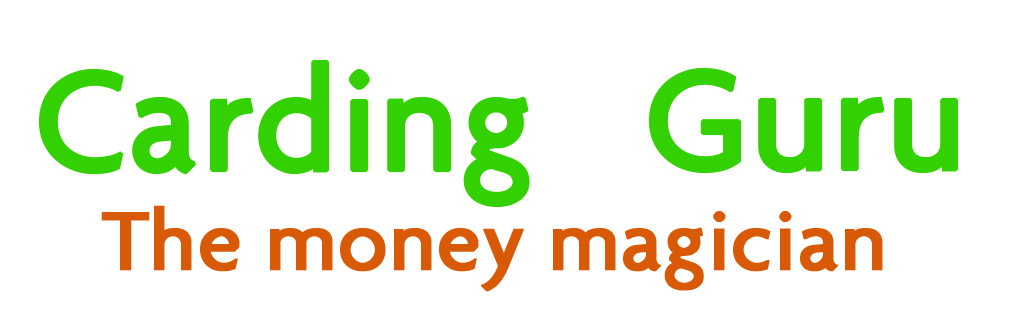
<style>
.page{position:relative;width:1020px;height:335px;background:#ffffff}
.page>*{position:absolute;margin:0}
.t1{font:151.3px "Agenda-Medium";color:#33d002;font-weight:bold}
.t2{font:88.8px "Agenda-Medium";color:#d85a06;font-weight:bold}
</style>
<div class="page">
<p class="t1" style="left:38px;top:59px;width:492px;height:149px">Carding 💓</p>
<p class="t1" style="left:648px;top:67px;width:311px;height:107px">Guru</p>
<p class="t2" style="left:101px;top:205px;width:782px;height:87px">The money magician</p>
</div>
